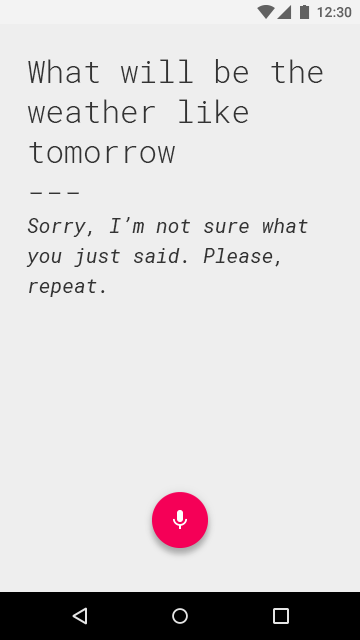
<style>
.page{position:relative;width:360px;height:640px;background:#eeeeee}
.page>*{position:absolute;margin:0}
.t1{font:20px/30px "RobotoMono-Italic";color:#333333}
.t2{font:31px/40px "RobotoMono-Light";color:#333333}
</style>
<div class="page">
<p class="t1" style="left:26px;top:59px;width:297px;height:238px"><span class="t2">What will be the weather like tomorrow<br>---<br></span>Sorry, I’m not sure what you just said. Please, repeat.</p>
</div>
